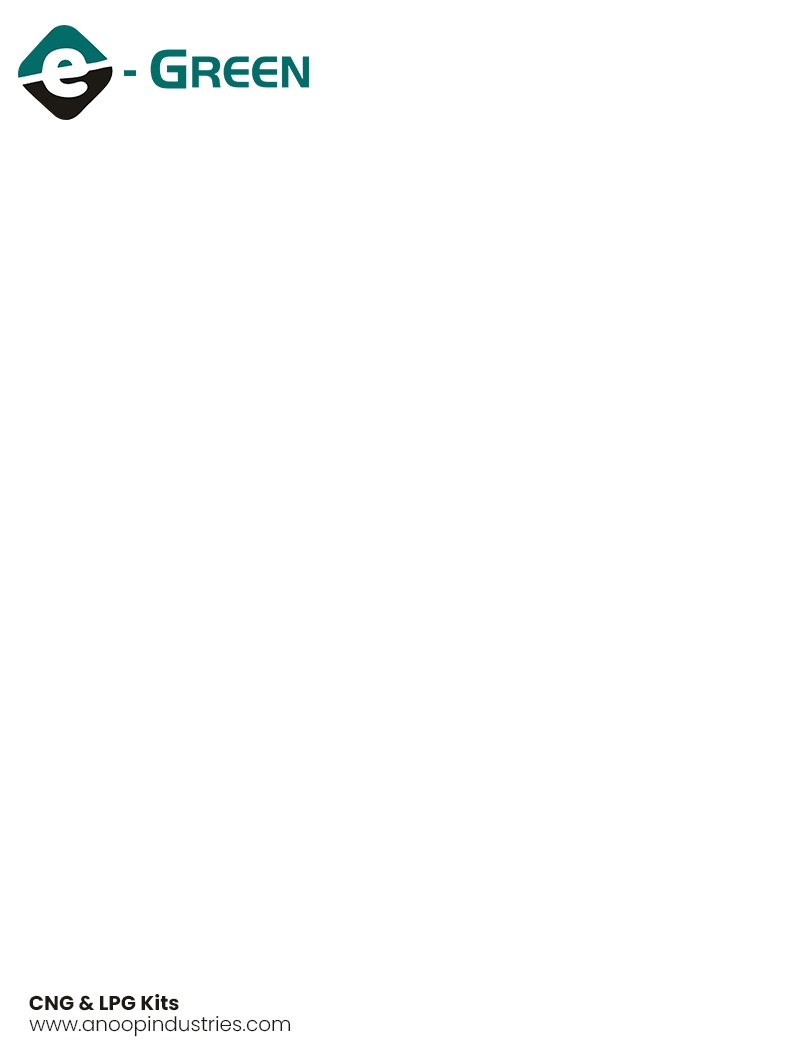
<style>
.page{position:relative;width:800px;height:1061px;background:#ffffff}
.page>*{position:absolute;margin:0}
.t1{font:20px "Poppins";color:#1d1a15}
.t2{font:20px "Poppins-Light";color:#1d1a15}
</style>
<div class="page">
<p class="t1" style="left:29px;top:994px;width:150px;height:17px">CNG &amp; LPG Kits</p>
<p class="t2" style="left:29px;top:1016px;width:262px;height:21px">www.anoopindustries.com</p>
</div>
